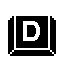
<style>
.page{position:relative;width:64px;height:64px;background:#ffffff}
.page>*{position:absolute;margin:0}
.t1{font:28px "Arial-BoldMT";color:#ffffff}
</style>
<div class="page">
<p class="t1" style="left:23px;top:21px;width:17px;height:20px">D</p>
</div>
